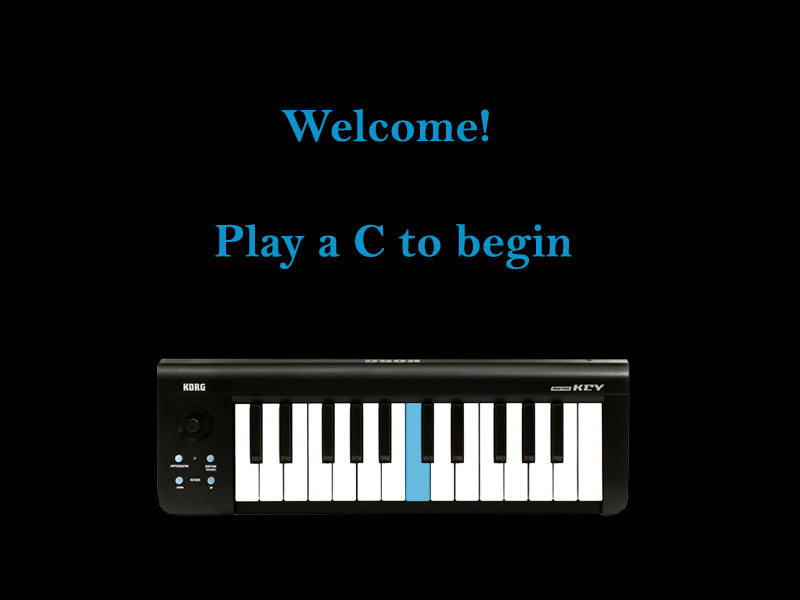
<style>
.page{position:relative;width:800px;height:600px;background:#000000}
.page>*{position:absolute;margin:0}
.t1{font:48px "BellMTBold";color:#0c94cd}
</style>
<div class="page">
<p class="t1" style="left:215px;top:108px;width:357px;height:161px;text-align:center">Welcome! <br><br>Play a C to begin</p>
</div>
